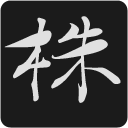
<style>
.page{position:relative;width:128px;height:128px;background:#1b1b1b}
.page>*{position:absolute;margin:0}
.t1{font:84.6px "KazurakiSPN-Light";color:#e0e0e0;scale:1.07 1}
</style>
<div class="page">
<p class="t1" style="left:4px;top:16px;width:117px;height:87px">株</p>
</div>
